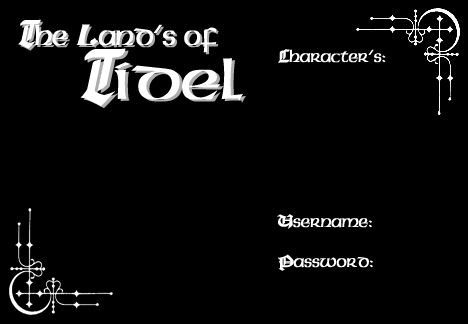
<style>
.page{position:relative;width:468px;height:324px;background:#000000}
.page>*{position:absolute;margin:0}
.t1{font:30px "Celtic-CondensedNormal";color:#ffffff}
.t2{font:36px "CathedralExtendedItalic";color:#ffffff}
.t3{font:30px "Brandywine-ExtendedItalic";color:#ffffff}
.t4{font:30px "Celtic-CondensedNormal"}
.t5{font:36px "CathedralExtendedItalic"}
.t6{font:30px "Brandywine-ExtendedItalic"}
.t7{font:60px "Celtic-Normal";color:#ffffff}
.t8{font:72px "CathedralExtendedItalic";color:#ffffff}
.t9{font:60px "Celtic-Normal"}
.t10{font:72px "CathedralExtendedItalic"}
.t11{font:18px "Celtic-CondensedNormal";color:#ffffff}
.t12{font:18px "CathedralExtendedNormal";color:#ffffff}
</style>
<div class="page">
<p class="t1" style="left:18px;top:19px;width:199px;height:34px"><span class="t2">T</span>he <span class="t3">L</span>and’s of</p>
<p class="t4" style="left:20px;top:21px;width:199px;height:34px"><span class="t5">T</span>he <span class="t6">L</span>and’s of</p>
<p class="t7" style="left:80px;top:48px;width:163px;height:59px"><span class="t8">T</span>idel</p>
<p class="t9" style="left:83px;top:50px;width:163px;height:59px"><span class="t10">T</span>idel</p>
<p class="t11" style="left:278px;top:49px;width:108px;height:14px"><span class="t12">C</span>haracter’s:</p>
<p class="t11" style="left:277px;top:214px;width:95px;height:15px"><span class="t12">U</span>sername:</p>
<p class="t11" style="left:277px;top:254px;width:96px;height:17px"><span class="t12">P</span>assword:</p>
</div>
